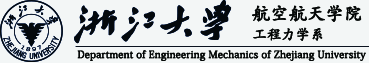
<style>
.page{position:relative;width:369px;height:63px;background:#f3f6f6}
.page>*{position:absolute;margin:0}
.t1{font:18px "AdobeKaitiStd-Regular";color:#040606;font-weight:bold}
.t2{font:14px "AdobeKaitiStd-Regular";color:#040606;font-weight:bold}
.t3{font:10px "AdobeKaitiStd-Regular";color:#040606;font-weight:bold}
</style>
<div class="page">
<p class="t1" style="left:252px;top:5px;width:110px;height:17px">航空航天学院</p>
<p class="t2" style="left:253px;top:27px;width:70px;height:14px">工程力学系</p>
<p class="t3" style="left:77px;top:50px;width:289px;height:11px">Department of Engineering Mechanics of Zhejiang University</p>
</div>
